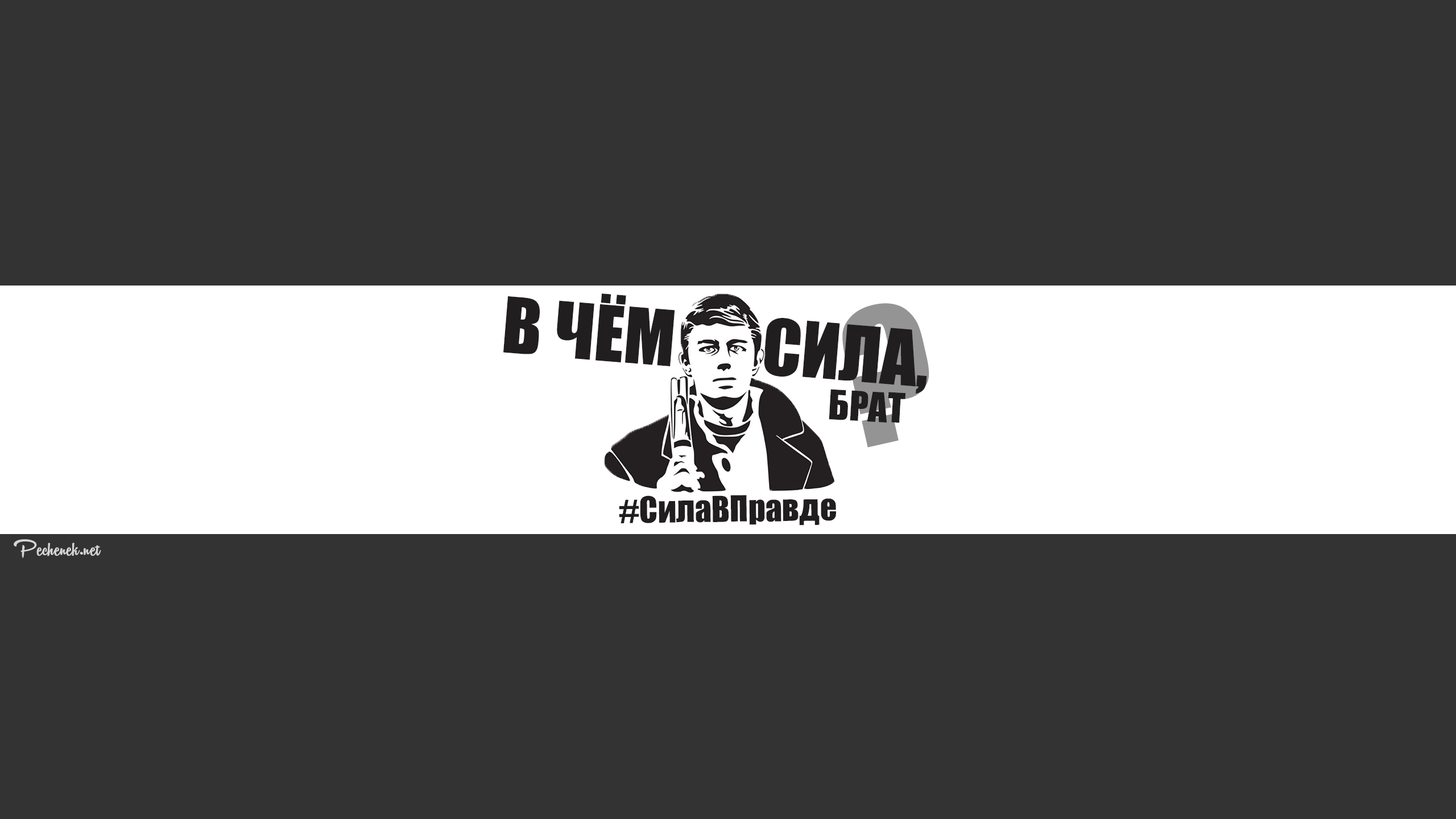
<style>
.page{position:relative;width:1456px;height:819px;background:#333333}
.page>*{position:absolute;margin:0}
.t1{font:71.1px "Impact";color:#211e20}
.t2{font:170.6px "Impact"}
.t3{font:37.9px "Impact";color:#211e20}
.t4{font:33.2px "Impact";color:#211e20}
.t5{font:26.1px "Vantom";color:#d5d5d5}
</style>
<div class="page">
<p class="t1" style="left:503px;top:293px;width:424px;height:101px;rotate:5deg">В ЧЁМ       СИЛА,</p>
<p class="t2" style="left:842px;top:303px;width:87px;height:145px;rotate:-13deg">?</p>
<p class="t3" style="left:829px;top:389px;width:77px;height:34px;rotate:3deg">БРАТ</p>
<p class="t4" style="left:619px;top:495px;width:217px;height:31px;rotate:-1deg">#СилаВПравде</p>
<p class="t5" style="left:14px;top:539px;width:87px;height:19px">Pechenek.net</p>
</div>
